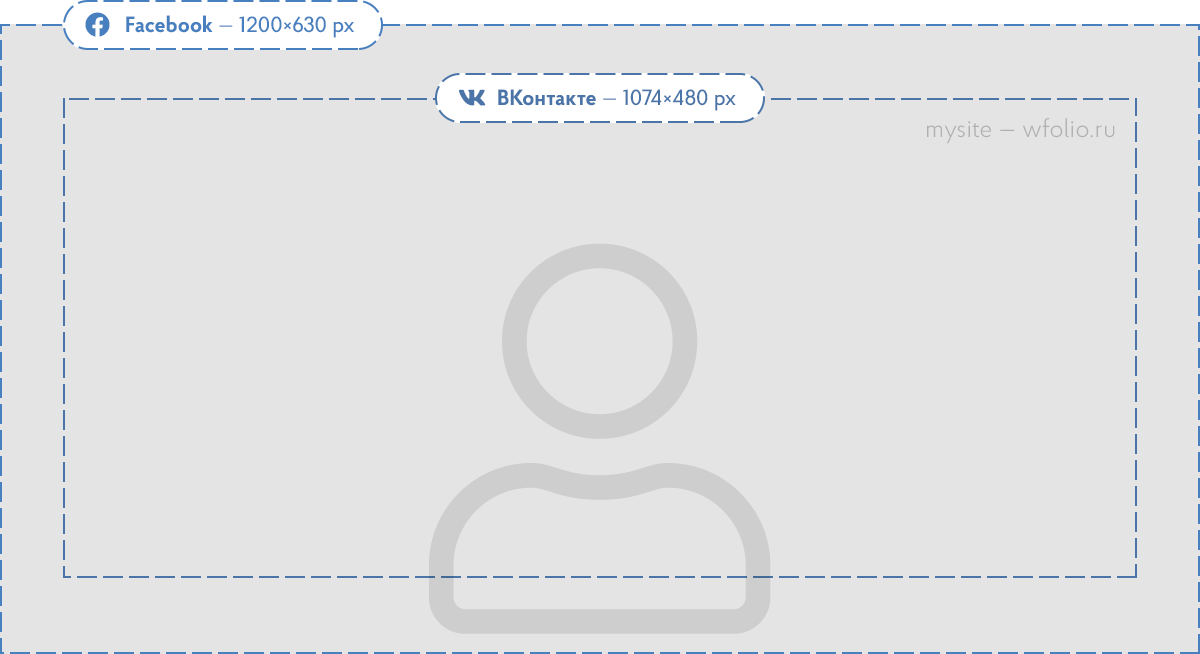
<style>
.page{position:relative;width:1200px;height:654px;background:#e4e4e4}
.page>*{position:absolute;margin:0}
.t1{font:22px "ProbaPro-Medium";letter-spacing:0.005em;color:#487fbf}
.t2{font:22px "ProbaPro-Bold";letter-spacing:0.005em;color:#487fbf}
.t3{font:22px "ProbaPro-Regular";letter-spacing:0.005em;color:#487fbf}
.t4{font:22px "ProbaPro-Medium";letter-spacing:0.005em;color:#4b75a8}
.t5{font:22px "ProbaPro-Bold";letter-spacing:0.005em;color:#4b75a8}
.t6{font:22px "ProbaPro-Regular";letter-spacing:0.005em;color:#4b75a8}
.t7{font:25px "ProbaPro-Light";letter-spacing:0.005em;color:#a3a3a3}
</style>
<div class="page">
<p class="t1" style="left:126px;top:15px;width:228px;height:23px"><span class="t2">Facebook </span><span class="t3">— </span>1200×630 px</p>
<p class="t4" style="left:498px;top:89px;width:238px;height:22px"><span class="t5">ВКонтакте </span><span class="t6">— </span>1074×480 px</p>
<p class="t7" style="left:927px;top:118px;width:188px;height:26px;opacity:0.8">mysite — wfolio.ru</p>
</div>
